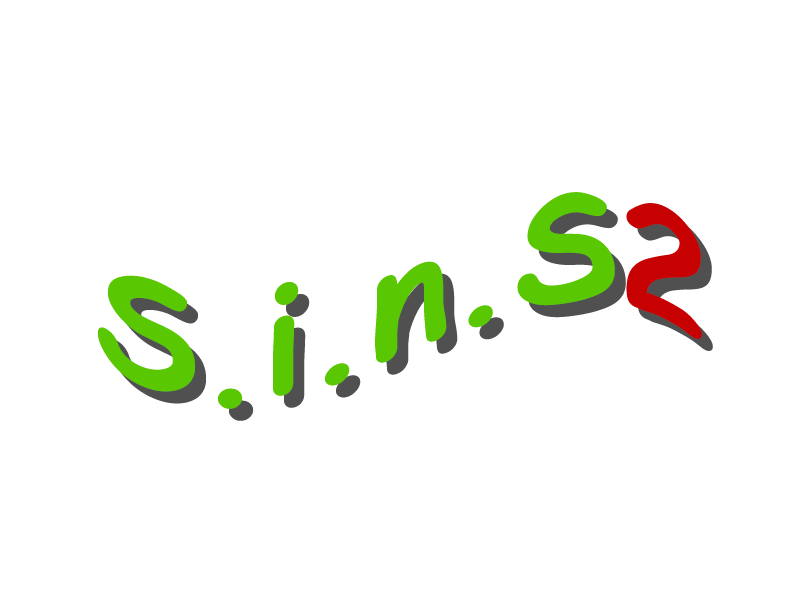
<style>
.page{position:relative;width:800px;height:600px;background:#ffffff}
.page>*{position:absolute;margin:0}
.t1{font:150px "ComicSansMS-Bold";color:#59c701}
.t2{font:150px "ComicSansMS-Bold";color:#c70101}
.t3{font:150px "ComicSansMS-Bold";color:#515151}
</style>
<div class="page">
<p class="t1" style="left:98px;top:192px;width:604px;height:217px">S.i.n.S<span class="t2">2</span></p>
<p class="t3" style="left:109px;top:204px;width:604px;height:217px">S.i.n.S2</p>
</div>
